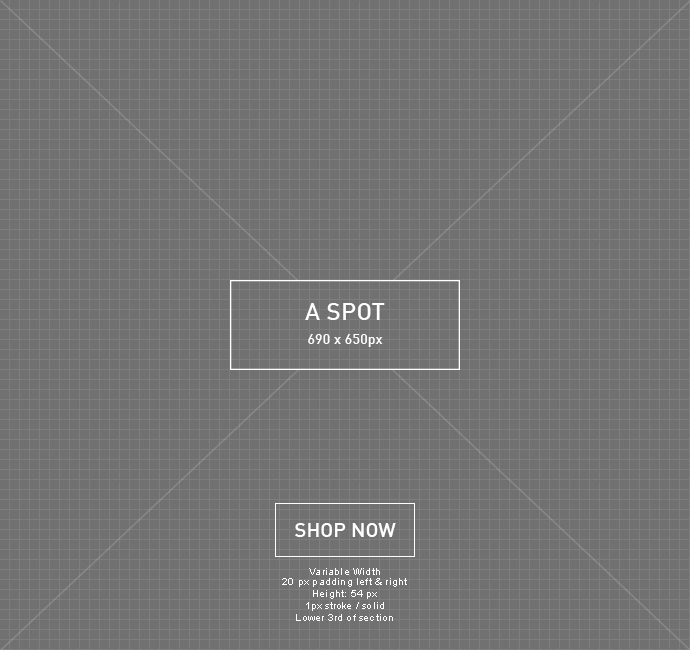
<style>
.page{position:relative;width:690px;height:650px;background:#717171}
.page>*{position:absolute;margin:0}
.t1{font:14px/24px "DIN-Medi";letter-spacing:0.015em;color:#ffffff}
.t2{font:24px/24px "DIN-Medi";letter-spacing:0.015em;color:#ffffff}
.t3{font:20px "DIN-Medi";letter-spacing:0.005em;color:#ffffff}
.t4{font:10px "ArialMT";letter-spacing:0.02em;color:#ffffff}
.t5{font:10px/9.3px "ArialMT";letter-spacing:0.02em;color:#ffffff}
</style>
<div class="page">
<p class="t1" style="left:305px;top:303px;width:80px;height:44px;text-align:center"><span class="t2">A SPOT<br></span>690 x 650px</p>
<p class="t3" style="left:295px;top:523px;width:101px;height:14px">SHOP NOW</p>
<p class="t4" style="left:282px;top:568px;width:125px;height:53px;text-align:center"><span class="t5">Variable Width<br>20 px padding left &amp; right<br></span>Height: 54 px<br>1px stroke / solid<br>Lower 3rd of section</p>
</div>
